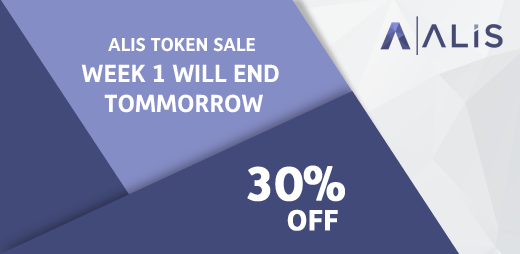
<style>
.page{position:relative;width:520px;height:254px;background:#414a78}
.page>*{position:absolute;margin:0}
.t1{font:19px "Depot-Bold";color:#ffffff}
.t2{font:25px/30px "Depot-Bold";color:#ffffff;text-transform:uppercase}
.t3{font:29px/30px "Depot-Bold";color:#ffffff;text-transform:uppercase;font-weight:bold}
.t4{font:48px/30px "Depot-Bold";letter-spacing:-0.04em;color:#ffffff;text-transform:uppercase;font-weight:bold}
.t5{font:48px/30px "Depot-Bold";color:#ffffff;text-transform:uppercase;font-weight:bold}
</style>
<div class="page">
<p class="t1" style="left:108px;top:37px;width:147px;height:15px">ALIS TOKEN SALE</p>
<p class="t2" style="left:81px;top:64px;width:198px;height:49px;text-align:center">Week 1 will end <br>Tommorrow</p>
<p class="t3" style="left:247px;top:165px;width:98px;height:66px;text-align:center"><span class="t4">30</span><span class="t5">%<br></span>    OFF</p>
</div>
